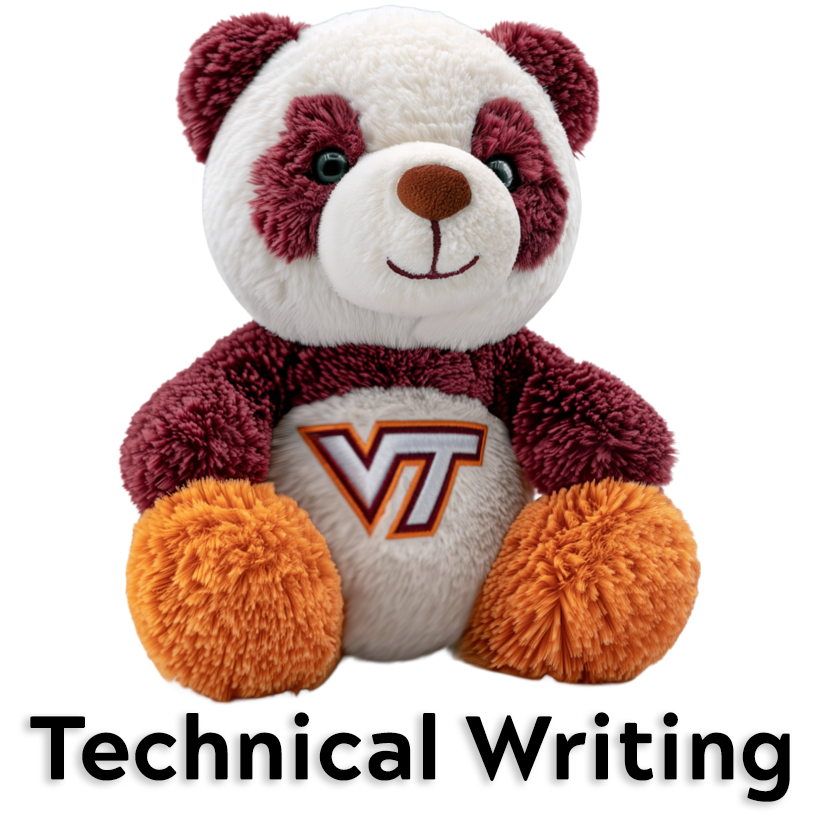
<style>
.page{position:relative;width:819px;height:819px;background:#ffffff}
.page>*{position:absolute;margin:0}
.t1{font:90px "AcherusGrotesque-ExtraBold";color:#000000}
</style>
<div class="page">
<p class="t1" style="left:30px;top:712px;width:760px;height:90px">Technical Writing</p>
</div>
